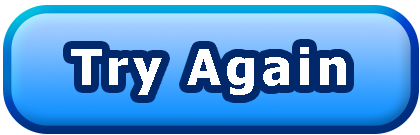
<style>
.page{position:relative;width:420px;height:135px}
.page>*{position:absolute;margin:0}
.t1{font:50px "Tahoma-Bold";letter-spacing:0.1em;color:#ffffff}
</style>
<div class="page">
<p class="t1" style="left:71px;top:47px;width:275px;height:48px">Try Again</p>
</div>
